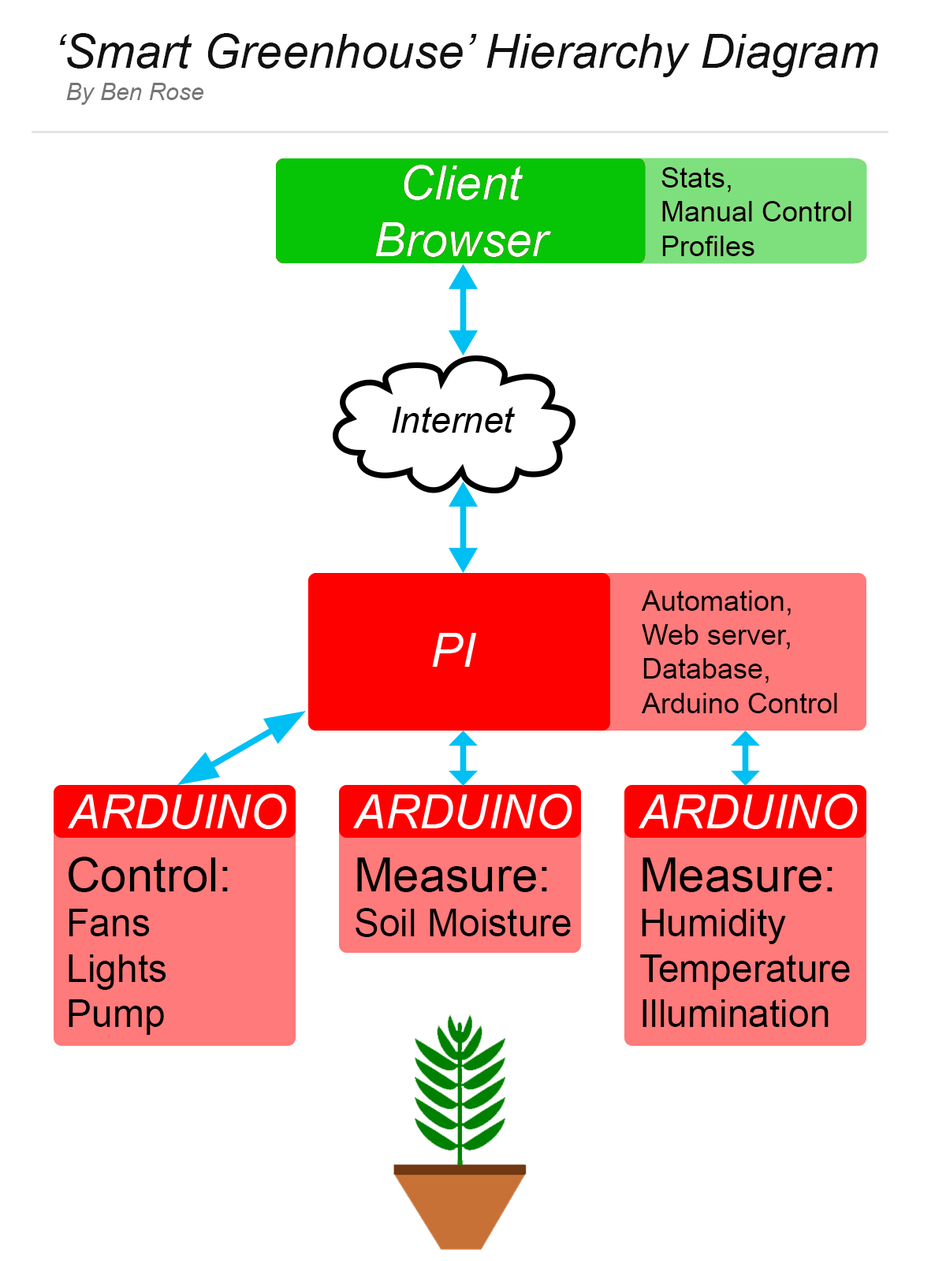
<style>
.page{position:relative;width:946px;height:1261px;background:#ffffff}
.page>*{position:absolute;margin:0}
.t1{font:47.3px "Arial-ItalicMT";color:#101010}
.t2{font:23.6px "Arial-ItalicMT";color:#767575}
.t3{font:28.4px "ArialMT";color:#010101}
.t4{font:28.4px "ArialMT";color:#000000}
.t5{font:37.8px "ArialMT";color:#000000}
.t6{font:47.3px "ArialMT";color:#000000}
</style>
<div class="page">
<p class="t1" style="left:59px;top:33px;width:819px;height:44px">‘Smart Greenhouse’ Hierarchy Diagram</p>
<p class="t2" style="left:66px;top:83px;width:137px;height:22px">By Ben Rose</p>
<p class="t3" style="left:661px;top:167px;width:190px;height:89px">Stats,<br>Manual Control<br>Profiles</p>
<p class="t4" style="left:641px;top:590px;width:196px;height:123px">Automation,<br>Web server,<br>Database,<br>Arduino Control</p>
<p class="t5" style="left:69px;top:857px;width:159px;height:178px"><span class="t6">Control:<br></span>Fans<br>Lights<br>Pump</p>
<p class="t5" style="left:355px;top:857px;width:216px;height:80px"><span class="t6">Measure:<br></span>Soil Moisture</p>
<p class="t5" style="left:640px;top:857px;width:210px;height:170px"><span class="t6">Measure:<br></span>Humidity<br>Temperature<br>Illumination</p>
</div>
